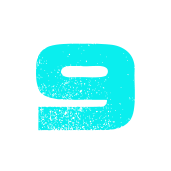
<style>
.page{position:relative;width:171px;height:171px;background:#ffffff}
.page>*{position:absolute;margin:0}
.t1{font:121px "Coalition";color:#0aeeee}
</style>
<div class="page">
<p class="t1" style="left:36px;top:43px;width:99px;height:88px">9</p>
</div>
